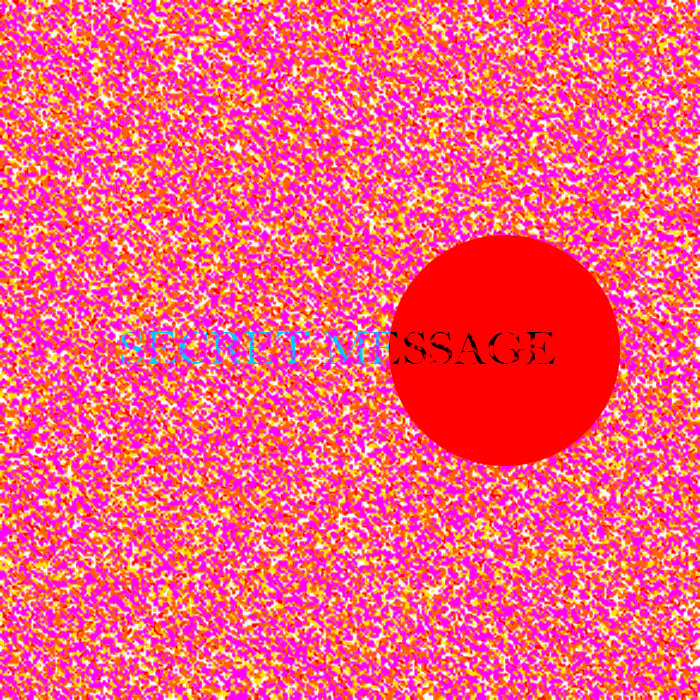
<style>
.page{position:relative;width:700px;height:700px}
.page>*{position:absolute;margin:0}
.t1{font:49.5px "BellMT"}
</style>
<div class="page">
<p class="t1" style="left:121px;top:332px;width:434px;height:32px">SECRET MESSAGE</p>
</div>
